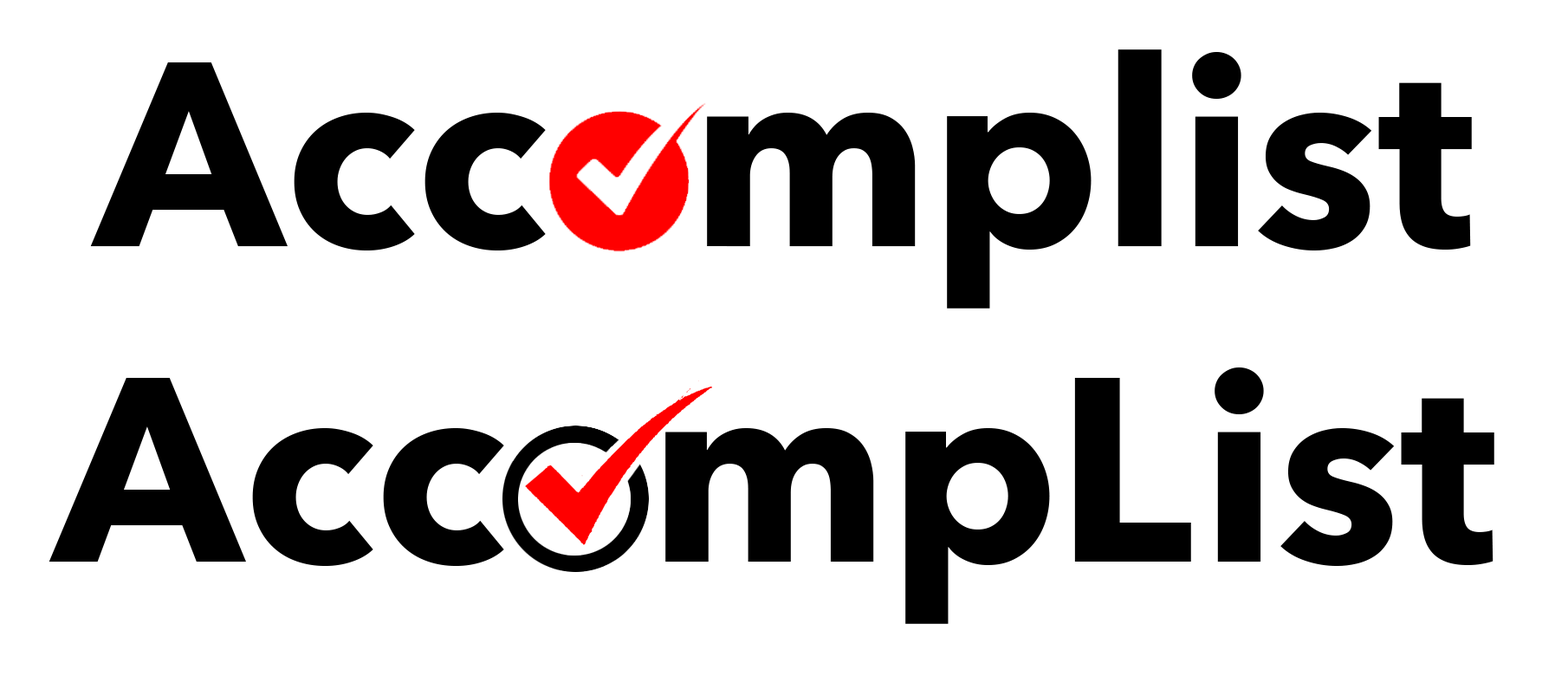
<style>
.page{position:relative;width:1568px;height:689px;background:#ffffff}
.page>*{position:absolute;margin:0}
.t1{font:259.9px "AvenirNext-Bold";color:#000000}
.t2{font:259.9px "AvenirNext-Bold";letter-spacing:-0.075em;color:#ffffff}
</style>
<div class="page">
<p class="t1" style="left:90px;top:49px;width:1382px;height:259px">Acc<span class="t2">o</span>mplist</p>
<p class="t1" style="left:1074px;top:378px;width:117px;height:183px">L</p>
</div>
